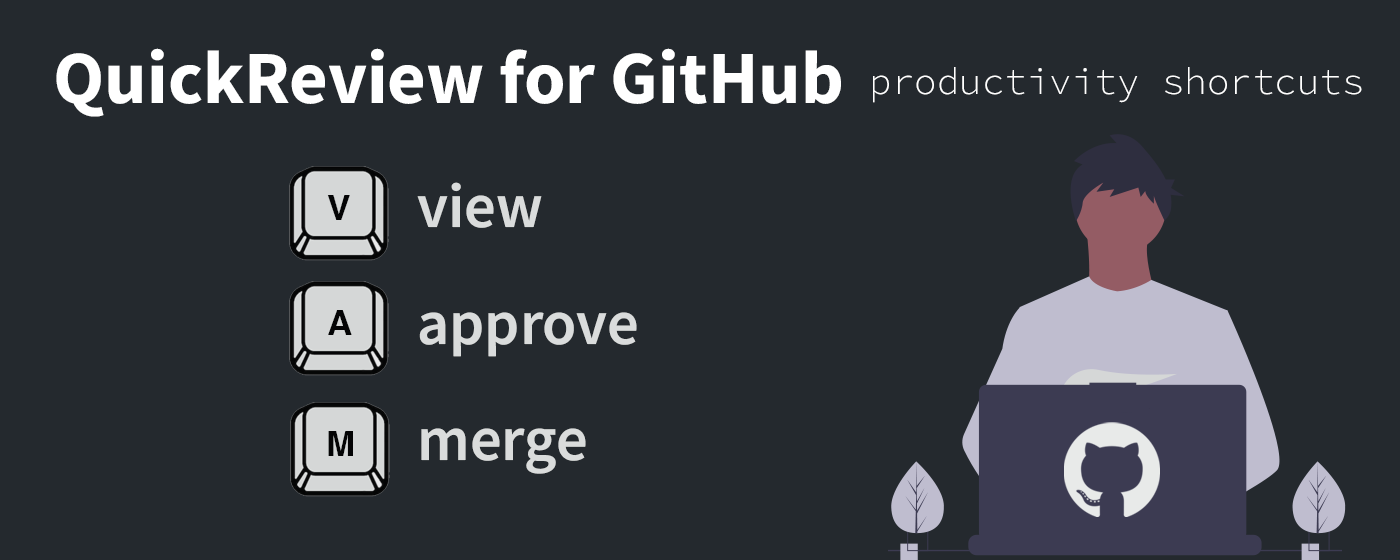
<style>
.page{position:relative;width:1400px;height:560px;background:#24292e}
.page>*{position:absolute;margin:0}
.t1{font:75px "SourceSansRoman-Bold";color:#ffffff}
.t2{font:37.5px "SourceCodeRoman-Light";color:#ffffff}
.t3{font:62.5px/116.7px "SourceSansRoman-Semibold";color:#e8eae9}
.t4{font:34.9px "Helvetica-Bold";color:#000000}
</style>
<div class="page">
<p class="t1" style="left:56px;top:48px;width:785px;height:69px">QuickReview for GitHub</p>
<p class="t2" style="left:873px;top:67px;width:489px;height:36px">productivity shortcuts</p>
<p class="t3" style="left:417px;top:182px;width:220px;height:292px;opacity:0.9">view<br>approve<br>merge</p>
<p class="t4" style="left:327px;top:195px;width:23px;height:25px">V</p>
<p class="t4" style="left:328px;top:310px;width:24px;height:25px">A</p>
<p class="t4" style="left:328px;top:431px;width:25px;height:25px">M</p>
</div>
